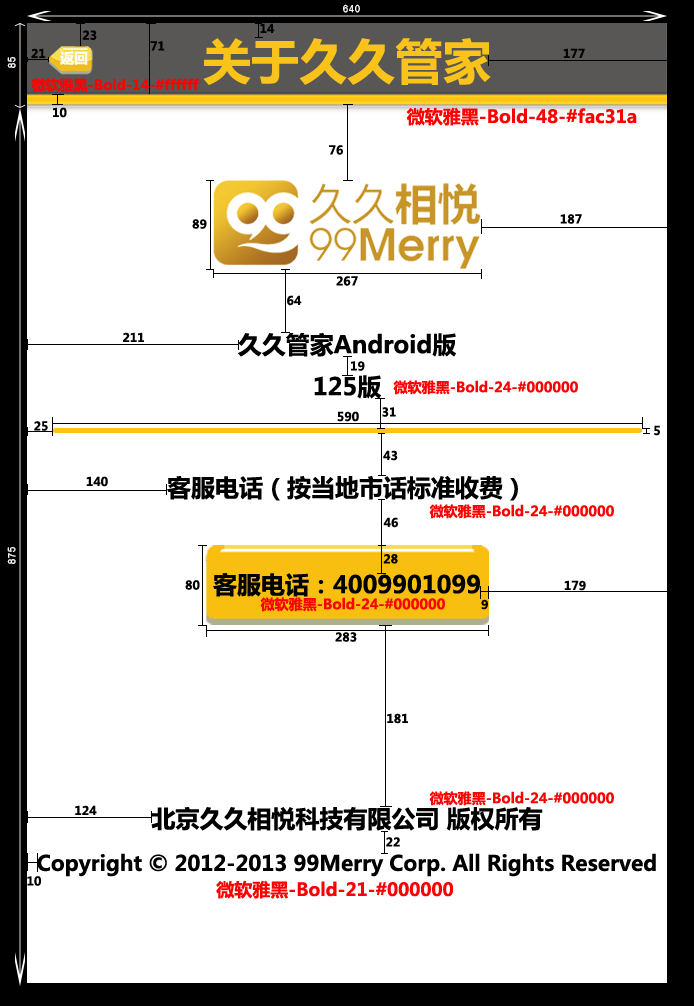
<style>
.page{position:relative;width:694px;height:1006px;background:#ffffff}
.page>*{position:absolute;margin:0}
.t1{font:12px "MicrosoftYaHei-Bold";color:#000000}
.t2{font:48px "MicrosoftYaHei-Bold";color:#fac31a}
.t3{font:14px "MicrosoftYaHei-Bold";color:#ffffff}
.t4{font:14px "MicrosoftYaHei-Bold";color:#ff0000}
.t5{font:18px "MicrosoftYaHei-Bold";color:#ff0000}
.t6{font:24px "MicrosoftYaHei-Bold";color:#000000}
.t7{font:21px "MicrosoftYaHei-Bold";color:#000000}
</style>
<div class="page">
<p class="t1" style="left:82px;top:30px;width:15px;height:10px">23</p>
<p class="t1" style="left:260px;top:23px;width:15px;height:10px">14</p>
<p class="t1" style="left:150px;top:41px;width:15px;height:10px">71</p>
<p class="t2" style="left:203px;top:38px;width:288px;height:47px">关于久久管家</p>
<p class="t1" style="left:31px;top:48px;width:15px;height:10px">21</p>
<p class="t3" style="left:60px;top:51px;width:28px;height:14px">返回</p>
<p class="t1" style="left:563px;top:48px;width:22px;height:10px">177</p>
<p class="t4" style="left:31px;top:78px;width:168px;height:14px">微软雅黑-Bold-14-#ffffff</p>
<p class="t1" style="left:53px;top:107px;width:14px;height:11px">10</p>
<p class="t5" style="left:406px;top:107px;width:231px;height:19px">微软雅黑-Bold-48-#fac31a</p>
<p class="t1" style="left:329px;top:145px;width:14px;height:10px">76</p>
<p class="t1" style="left:192px;top:219px;width:15px;height:10px">89</p>
<p class="t1" style="left:560px;top:214px;width:22px;height:10px">187</p>
<p class="t1" style="left:336px;top:276px;width:22px;height:10px">267</p>
<p class="t1" style="left:287px;top:295px;width:15px;height:11px">64</p>
<p class="t1" style="left:123px;top:332px;width:21px;height:10px">211</p>
<p class="t6" style="left:238px;top:333px;width:218px;height:66px;text-align:center">久久管家Android版<br>125版</p>
<p class="t1" style="left:351px;top:361px;width:14px;height:10px">19</p>
<p class="t1" style="left:337px;top:411px;width:22px;height:11px">590</p>
<p class="t1" style="left:382px;top:407px;width:14px;height:10px">31</p>
<p class="t1" style="left:34px;top:421px;width:14px;height:10px">25</p>
<p class="t1" style="left:654px;top:425px;width:6px;height:11px">5</p>
<p class="t1" style="left:383px;top:450px;width:15px;height:11px">43</p>
<p class="t1" style="left:86px;top:476px;width:22px;height:11px">140</p>
<p class="t6" style="left:167px;top:475px;width:351px;height:26px">客服电话（按当地市话标准收费）</p>
<p class="t4" style="left:429px;top:504px;width:185px;height:15px">微软雅黑-Bold-24-#000000</p>
<p class="t1" style="left:383px;top:517px;width:15px;height:11px">46</p>
<p class="t1" style="left:383px;top:554px;width:15px;height:10px">28</p>
<p class="t1" style="left:185px;top:580px;width:15px;height:10px">80</p>
<p class="t6" style="left:213px;top:573px;width:267px;height:24px">客服电话：4009901099</p>
<p class="t1" style="left:564px;top:580px;width:22px;height:11px">179</p>
<p class="t1" style="left:481px;top:599px;width:7px;height:11px">9</p>
<p class="t1" style="left:335px;top:632px;width:22px;height:10px">283</p>
<p class="t1" style="left:387px;top:713px;width:21px;height:11px">181</p>
<p class="t1" style="left:75px;top:805px;width:22px;height:10px">124</p>
<p class="t6" style="left:151px;top:807px;width:392px;height:24px">北京久久相悦科技有限公司 版权所有</p>
<p class="t1" style="left:386px;top:837px;width:14px;height:10px">22</p>
<p class="t7" style="left:37px;top:853px;width:619px;height:24px">Copyright © 2012-2013 99Merry Corp. All Rights Reserved</p>
<p class="t1" style="left:27px;top:876px;width:14px;height:10px">10</p>
<p class="t5" style="left:216px;top:880px;width:238px;height:19px">微软雅黑-Bold-21-#000000</p>
</div>
